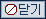
<style>
.page{position:relative;width:46px;height:19px;background:#d8dee3}
.page>*{position:absolute;margin:0}
.t1{font:12px "Gulim";color:#143156}
</style>
<div class="page">
<p class="t1" style="left:19px;top:4px;width:21px;height:11px">닫기</p>
</div>
